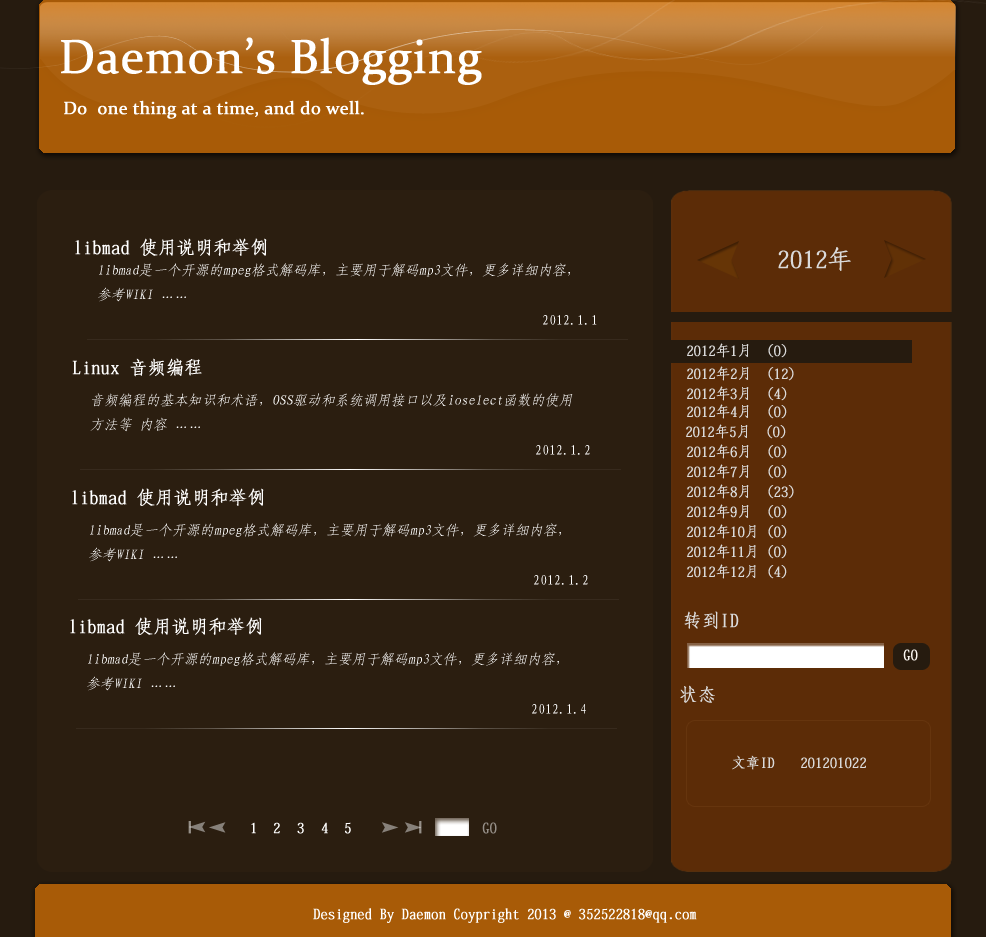
<style>
.page{position:relative;width:986px;height:937px;background:#2b1e10}
.page>*{position:absolute;margin:0}
.t1{font:48px "Constantia";color:#ffffff;font-weight:bold}
.t2{font:18px "Constantia";color:#ffffff;font-weight:bold}
.t3{font:18px "AdobeFangsongStd-Regular";color:#ffffff;font-weight:bold}
.t4{font:24px "AdobeFangsongStd-Regular";color:#dadada;font-weight:bold}
.t5{font:14px "FangSong_GB2312";color:#ffffff;font-style:italic}
.t6{font:14px "FangSong_GB2312";color:#ffffff}
.t7{font:14px "AdobeFangsongStd-Regular";color:#dadada;font-weight:bold}
.t8{font:18px "AdobeFangsongStd-Regular";color:#dadada;font-weight:bold}
.t9{font:14px "AdobeFangsongStd-Regular";color:#fbf6f0;font-weight:bold}
.t10{font:14px "AdobeFangsongStd-Regular";color:#ffffff;font-weight:bold}
.t11{font:14px "AdobeFangsongStd-Regular";color:#958f88;font-weight:bold}
</style>
<div class="page">
<p class="t1" style="left:61px;top:37px;width:421px;height:48px">Daemon’s Blogging</p>
<p class="t2" style="left:64px;top:100px;width:300px;height:19px">Do  one thing at a time, and do well.</p>
<p class="t3" style="left:75px;top:238px;width:192px;height:18px">libmad 使用说明和举例</p>
<p class="t4" style="left:778px;top:247px;width:73px;height:24px">2012年</p>
<p class="t5" style="left:98px;top:263px;width:472px;height:39px">libmad是一个开源的mpeg格式解码库，主要用于解码mp3文件，更多详细内容，<br>参考WIKI ……</p>
<p class="t6" style="left:543px;top:315px;width:54px;height:10px">2012.1.1</p>
<p class="t7" style="left:687px;top:343px;width:100px;height:15px">2012年1月 （0）</p>
<p class="t3" style="left:72px;top:358px;width:130px;height:19px">Linux 音频编程</p>
<p class="t7" style="left:687px;top:366px;width:107px;height:15px">2012年2月 （12）</p>
<p class="t7" style="left:687px;top:386px;width:100px;height:15px">2012年3月 （4）</p>
<p class="t5" style="left:90px;top:393px;width:483px;height:39px">音频编程的基本知识和术语，OSS驱动和系统调用接口以及ioselect函数的使用<br>方法等 内容 ……</p>
<p class="t7" style="left:687px;top:404px;width:100px;height:15px">2012年4月 （0）</p>
<p class="t7" style="left:686px;top:424px;width:100px;height:15px">2012年5月 （0）</p>
<p class="t6" style="left:536px;top:445px;width:54px;height:10px">2012.1.2</p>
<p class="t7" style="left:687px;top:444px;width:100px;height:15px">2012年6月 （0）</p>
<p class="t7" style="left:687px;top:464px;width:100px;height:15px">2012年7月 （0）</p>
<p class="t7" style="left:687px;top:484px;width:107px;height:15px">2012年8月 （23）</p>
<p class="t3" style="left:72px;top:488px;width:192px;height:18px">libmad 使用说明和举例</p>
<p class="t7" style="left:687px;top:504px;width:100px;height:15px">2012年9月 （0）</p>
<p class="t5" style="left:89px;top:523px;width:472px;height:39px">libmad是一个开源的mpeg格式解码库，主要用于解码mp3文件，更多详细内容，<br>参考WIKI ……</p>
<p class="t7" style="left:687px;top:524px;width:100px;height:15px">2012年10月（0）</p>
<p class="t7" style="left:687px;top:544px;width:100px;height:15px">2012年11月（0）</p>
<p class="t7" style="left:687px;top:564px;width:100px;height:15px">2012年12月（4）</p>
<p class="t6" style="left:534px;top:575px;width:54px;height:10px">2012.1.2</p>
<p class="t3" style="left:70px;top:617px;width:192px;height:18px">libmad 使用说明和举例</p>
<p class="t8" style="left:684px;top:611px;width:55px;height:18px">转到ID</p>
<p class="t5" style="left:87px;top:652px;width:472px;height:39px">libmad是一个开源的mpeg格式解码库，主要用于解码mp3文件，更多详细内容，<br>参考WIKI ……</p>
<p class="t9" style="left:903px;top:649px;width:15px;height:12px">GO</p>
<p class="t8" style="left:680px;top:685px;width:35px;height:18px">状态</p>
<p class="t6" style="left:532px;top:704px;width:54px;height:10px">2012.1.4</p>
<p class="t7" style="left:732px;top:755px;width:43px;height:15px">文章ID</p>
<p class="t7" style="left:801px;top:757px;width:65px;height:12px">201201022</p>
<p class="t10" style="left:251px;top:822px;width:5px;height:12px">1</p>
<p class="t10" style="left:273px;top:822px;width:7px;height:12px">2</p>
<p class="t10" style="left:297px;top:822px;width:7px;height:12px">3</p>
<p class="t10" style="left:321px;top:822px;width:7px;height:12px">4</p>
<p class="t10" style="left:345px;top:822px;width:6px;height:12px">5</p>
<p class="t11" style="left:482px;top:822px;width:15px;height:12px">GO</p>
<p class="t10" style="left:313px;top:908px;width:384px;height:15px">Designed By Daemon Coypright 2013 @ 352522818@qq.com</p>
</div>
